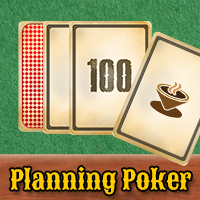
<style>
.page{position:relative;width:200px;height:200px}
.page>*{position:absolute;margin:0}
.t1{font:26px "Sancreek-Regular";color:#ffcc00}
</style>
<div class="page">
<p class="t1" style="left:10px;top:166px;width:181px;height:29px">Planning Poker</p>
</div>
